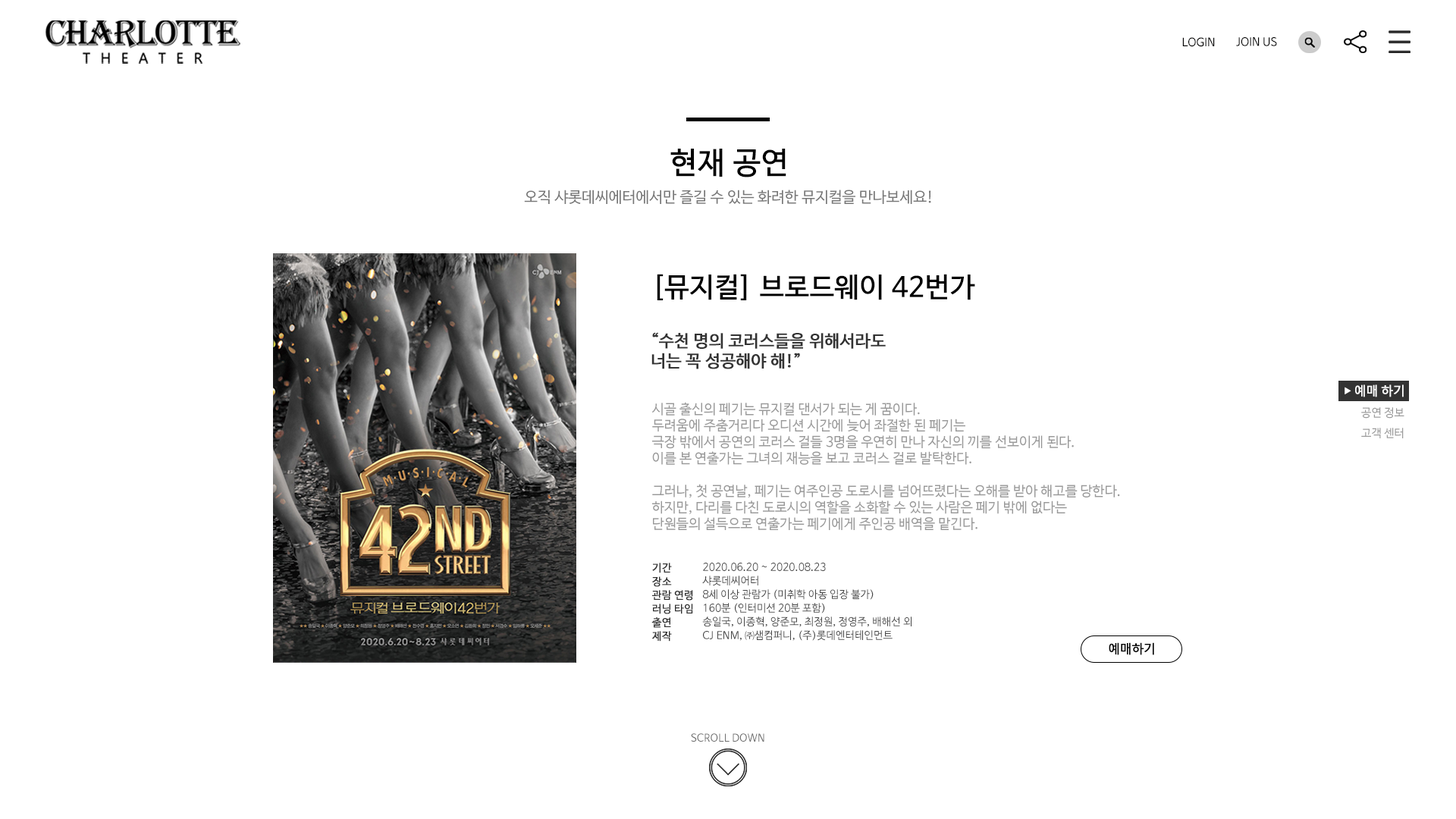
<style>
.page{position:relative;width:1456px;height:819px;background:#ffffff}
.page>*{position:absolute;margin:0}
.t1{font:11.4px "NanumBarunGothic-YetHangul";color:#010000}
.t2{font:11.4px "NanumBarunGothic-YetHangul";color:#000000}
.t3{font:30.3px "NanumBarunGothic-YetHangul";color:#000000;font-weight:bold}
.t4{font:15.2px "NanumBarunGothic-YetHangul";color:#777777}
.t5{font:27.3px "NanumBarunGothic-YetHangul";color:#000000;font-weight:bold}
.t6{font:16.7px "NanumBarunGothic-YetHangul";color:#333333;font-weight:bold}
.t7{font:7.6px "NanumBarunGothic-YetHangul";color:#ffffff;font-weight:bold}
.t8{font:12.9px "NanumBarunGothic-YetHangul";color:#ffffff;font-weight:bold}
.t9{font:13.6px "NanumBarunGothic-YetHangul";color:#999999}
.t10{font:10.6px/13.6px "NanumBarunGothic-YetHangul";color:#333333;font-weight:bold}
.t11{font:10.6px/13.6px "NanumBarunGothic-YetHangul";color:#444444}
.t12{font:12.8px "NanumBarunGothic-YetHangul";color:#000000;font-weight:bold}
.t13{font:10.6px "NanumBarunGothic-YetHangul";color:#6e6e6e}
</style>
<div class="page">
<p class="t1" style="left:1182px;top:37px;width:33px;height:10px">LOGIN</p>
<p class="t2" style="left:1236px;top:37px;width:41px;height:9px">JOIN US</p>
<p class="t3" style="left:670px;top:149px;width:116px;height:28px">현재 공연</p>
<p class="t4" style="left:524px;top:190px;width:407px;height:14px">오직 샤롯데씨에터에서만 즐길 수 있는 화려한 뮤지컬을 만나보세요!</p>
<p class="t5" style="left:657px;top:274px;width:318px;height:26px">[뮤지컬] 브로드웨이 42번가</p>
<p class="t6" style="left:651px;top:332px;width:235px;height:37px">“수천 명의 코러스들을 위해서라도<br>너는 꼭 성공해야 해!”</p>
<p class="t7" style="left:1345px;top:387px;width:6px;height:7px">▶</p>
<p class="t8" style="left:1355px;top:384px;width:49px;height:13px">예매 하기</p>
<p class="t9" style="left:651px;top:402px;width:469px;height:129px">시골 출신의 페기는 뮤지컬 댄서가 되는 게 꿈이다.<br>두려움에 주춤거리다 오디션 시간에 늦어 좌절한 된 페기는<br>극장 밖에서 공연의 코러스 걸들 3명을 우연히 만나 자신의 끼를 선보이게 된다.<br>이를 본 연출가는 그녀의 재능을 보고 코러스 걸로 발탁한다.<br><br>그러나, 첫 공연날, 페기는 여주인공 도로시를 넘어뜨렸다는 오해를 받아 해고를 당한다.<br>하지만, 다리를 다친 도로시의 역할을 소화할 수 있는 사람은 페기 밖에 없다는 <br>단원들의 설득으로 연출가는 페기에게 주인공 배역을 맡긴다.</p>
<p class="t10" style="left:651px;top:563px;width:42px;height:79px">기간 <br>장소 <br>관람 연령<br>러닝 타임 <br>출연<br>제작</p>
<p class="t11" style="left:702px;top:563px;width:210px;height:78px">2020.06.20 ~ 2020.08.23<br>  샤롯데씨어터<br>  8세 이상 관람가 (미취학 아동 입장 불가)<br>  160분 (인터미션 20분 포함)<br>  송일국, 이종혁, 양준모, 최정원, 정영주, 배해선 외<br>  CJ ENM, ㈜샘컴퍼니, (주)롯데엔터테인먼트</p>
<p class="t12" style="left:1109px;top:642px;width:45px;height:13px">예매하기</p>
<p class="t13" style="left:691px;top:733px;width:73px;height:9px">SCROLL DOWN</p>
</div>
